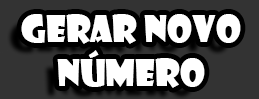
<style>
.page{position:relative;width:259px;height:99px;background:#333333}
.page>*{position:absolute;margin:0}
.t1{font:36px "ShowcardGothic-Reg";color:#ffffff}
</style>
<div class="page">
<p class="t1" style="left:21px;top:14px;width:220px;height:74px;text-align:center">gerar novo<br>número</p>
</div>
